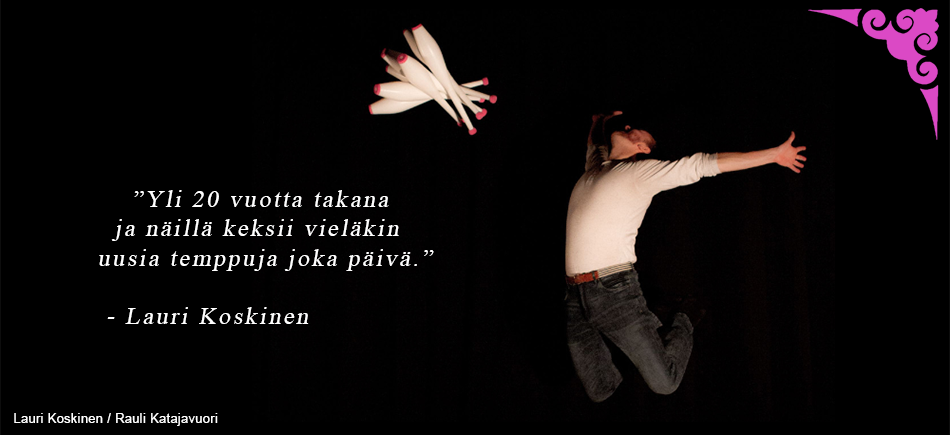
<style>
.page{position:relative;width:950px;height:435px;background:#000000}
.page>*{position:absolute;margin:0}
.t1{font:24.3px "TimesNewRomanPSMT";letter-spacing:0.1em;color:#ffffff;font-style:italic}
.t2{font:12.5px "ArialMT";letter-spacing:0.04em;color:#ffffff}
</style>
<div class="page">
<p class="t1" style="left:99px;top:190px;width:335px;height:134px">”Yli 20 vuotta takana <br>  ja näillä keksii vieläkin <br>uusia temppuja joka päivä.”<br>    <br> - Lauri Koskinen</p>
<p class="t2" style="left:14px;top:413px;width:204px;height:13px">Lauri Koskinen / Rauli Katajavuori</p>
</div>
